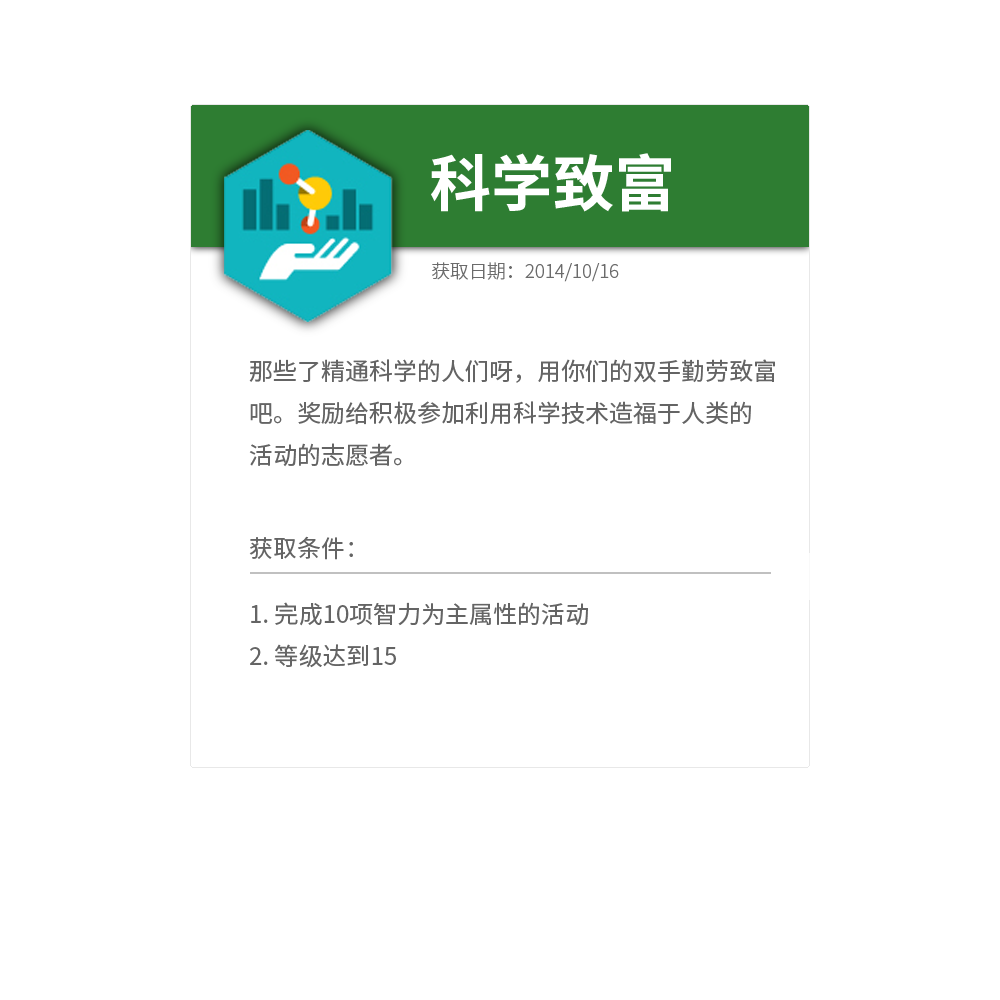
<style>
.page{position:relative;width:1000px;height:1000px;background:#ffffff}
.page>*{position:absolute;margin:0}
.t1{font:61.3px "NotoSansCJKsc-Bold";color:#ffffff}
.t2{font:18.7px "NotoSansCJKsc-Light";color:#6b6b6b}
.t3{font:24px "NotoSansCJKsc-Regular";color:#646464}
</style>
<div class="page">
<p class="t1" style="left:431px;top:153px;width:240px;height:59px">科学致富</p>
<p class="t2" style="left:432px;top:262px;width:187px;height:20px">获取日期：2014/10/16</p>
<p class="t3" style="left:249px;top:359px;width:526px;height:108px">那些了精通科学的人们呀，用你们的双手勤劳致富<br>吧。奖励给积极参加利用科学技术造福于人类的<br>活动的志愿者。</p>
<p class="t3" style="left:249px;top:536px;width:339px;height:132px">获取条件：<br><br>1. 完成10项智力为主属性的活动<br>2. 等级达到15</p>
</div>
